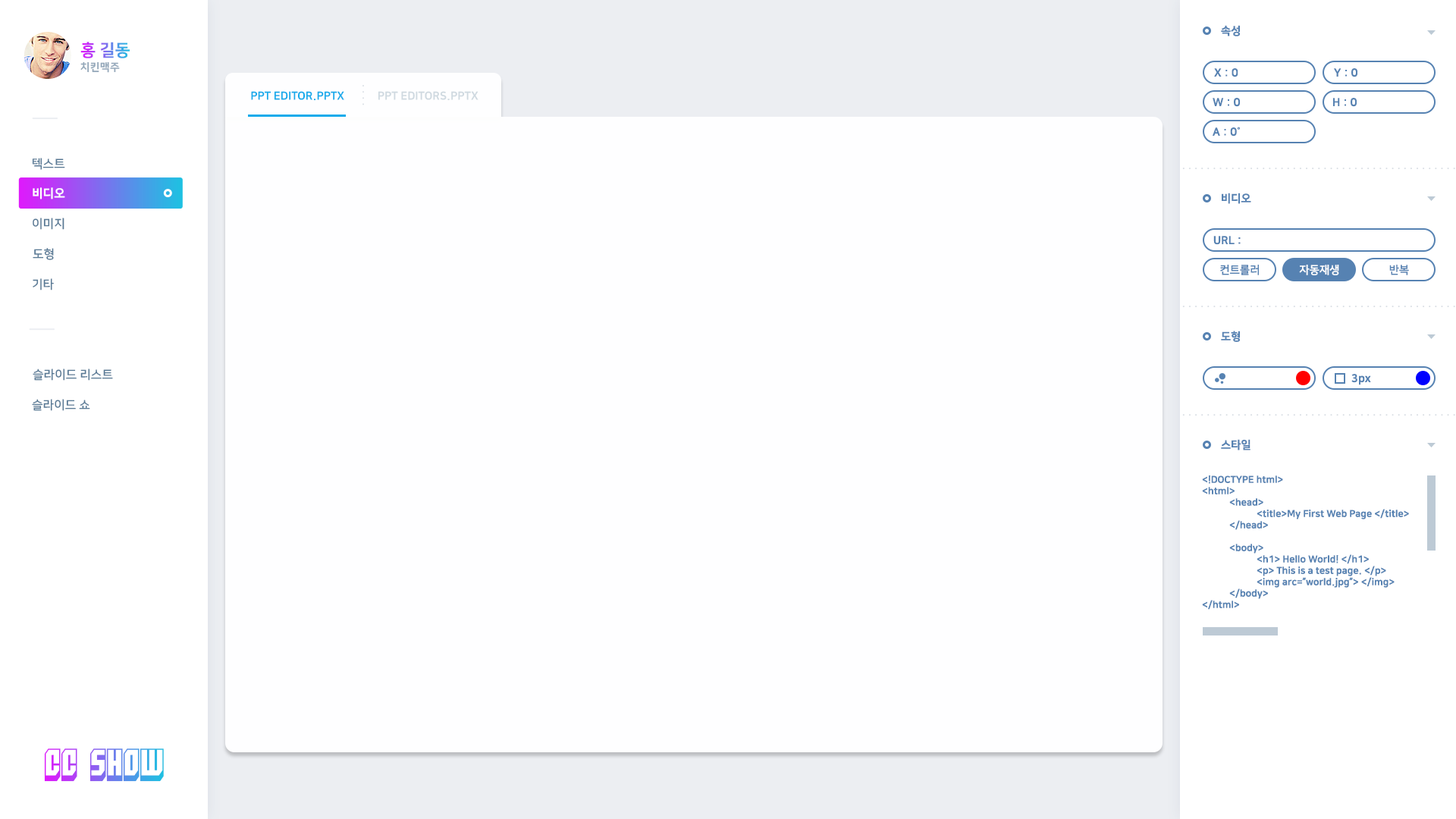
<style>
.page{position:relative;width:1456px;height:819px;background:#fefeff}
.page>*{position:absolute;margin:0}
.t1{font:11.1px "NanumSquareEB";color:#5682b2}
.t2{font:16.7px "NanumSquareEB";text-transform:uppercase}
.t3{font:10.6px "NanumSquareEB";letter-spacing:0.025em;color:#94a8ba;text-transform:uppercase}
.t4{font:11.1px "NanumSquareEB";color:#12aaeb;text-transform:uppercase}
.t5{font:11.1px "NanumSquareEB";color:#cfd9e0;text-transform:uppercase}
.t6{font:12.1px "NanumSquareB";color:#597a96;text-transform:uppercase}
.t7{font:12.1px "NanumSquareEB";color:#ffffff;text-transform:uppercase}
.t8{font:11.1px "NanumSquareB";color:#5682b2}
.t9{font:11.1px "NanumSquareB";color:#ffffff}
.t10{font:9.5px "NanumSquareEB";color:#5682b2}
.t11{font:31.6px "Blockt"}
</style>
<div class="page">
<p class="t1" style="left:1221px;top:25px;width:19px;height:11px">속성</p>
<p class="t2" style="left:80px;top:42px;width:50px;height:16px">홍 길동</p>
<p class="t3" style="left:80px;top:61px;width:40px;height:12px">치킨맥주</p>
<p class="t1" style="left:1214px;top:68px;width:24px;height:9px">X : 0</p>
<p class="t1" style="left:1334px;top:68px;width:23px;height:9px">Y : 0</p>
<p class="t4" style="left:251px;top:91px;width:93px;height:10px">PPT editor.pptx</p>
<p class="t5" style="left:378px;top:91px;width:101px;height:10px">PPT EDITORS.PPTX</p>
<p class="t1" style="left:1213px;top:98px;width:27px;height:9px">W : 0</p>
<p class="t1" style="left:1333px;top:98px;width:24px;height:9px">H : 0</p>
<p class="t1" style="left:1213px;top:127px;width:27px;height:9px">A : 0˚</p>
<p class="t6" style="left:32px;top:158px;width:33px;height:12px">텍스트</p>
<p class="t7" style="left:33px;top:187px;width:32px;height:12px">비디오</p>
<p class="t1" style="left:1222px;top:193px;width:29px;height:11px">비디오</p>
<p class="t6" style="left:33px;top:218px;width:31px;height:12px">이미지</p>
<p class="t1" style="left:1213px;top:236px;width:28px;height:9px">URL :</p>
<p class="t6" style="left:33px;top:248px;width:21px;height:12px">도형</p>
<p class="t8" style="left:1220px;top:265px;width:39px;height:10px">컨트롤러</p>
<p class="t9" style="left:1299px;top:265px;width:40px;height:10px">자동재생</p>
<p class="t8" style="left:1389px;top:265px;width:20px;height:10px">반복</p>
<p class="t6" style="left:33px;top:278px;width:21px;height:12px">기타</p>
<p class="t1" style="left:1221px;top:331px;width:19px;height:11px">도형</p>
<p class="t6" style="left:33px;top:369px;width:80px;height:12px">슬라이드 리스트</p>
<p class="t1" style="left:1351px;top:374px;width:20px;height:11px">3px</p>
<p class="t6" style="left:32px;top:399px;width:58px;height:12px">슬라이드 쇼</p>
<p class="t1" style="left:1221px;top:439px;width:29px;height:11px">스타일</p>
<p class="t10" style="left:1202px;top:475px;width:207px;height:135px">&lt;!DOCTYPE html&gt;<br>&lt;html&gt;<br> &lt;head&gt;<br>  &lt;title&gt;My First Web Page &lt;/title&gt;<br> &lt;/head&gt;<br><br> &lt;body&gt;<br>  &lt;h1&gt; Hello World! &lt;/h1&gt;<br>  &lt;p&gt; This is a test page. &lt;/p&gt;<br>  &lt;img arc=”world.jpg”&gt; &lt;/img&gt;<br> &lt;/body&gt;<br>&lt;/html&gt;</p>
<p class="t11" style="left:44px;top:748px;width:120px;height:34px">CC SHOW</p>
</div>
